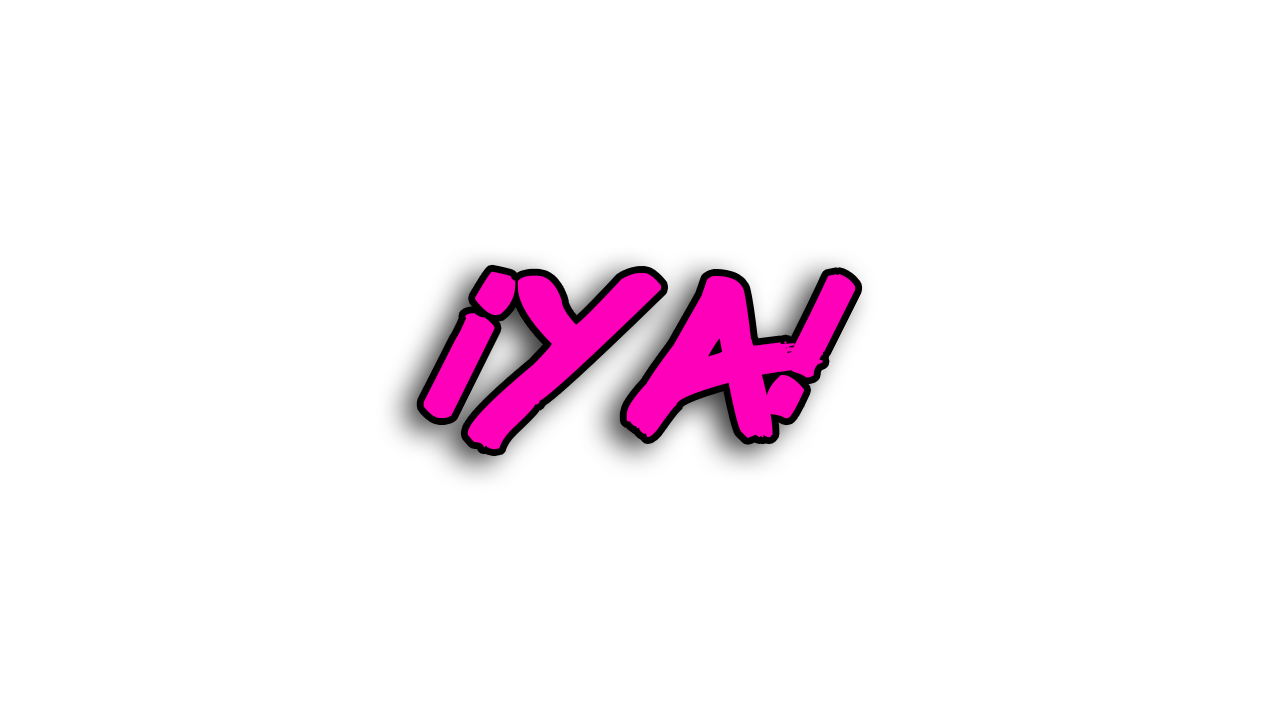
<style>
.page{position:relative;width:1280px;height:720px;background:#ffffff}
.page>*{position:absolute;margin:0}
.t1{font:200px "lazer84";color:#ff00ba}
</style>
<div class="page">
<p class="t1" style="left:423px;top:271px;width:433px;height:179px">¡Ya!</p>
</div>
